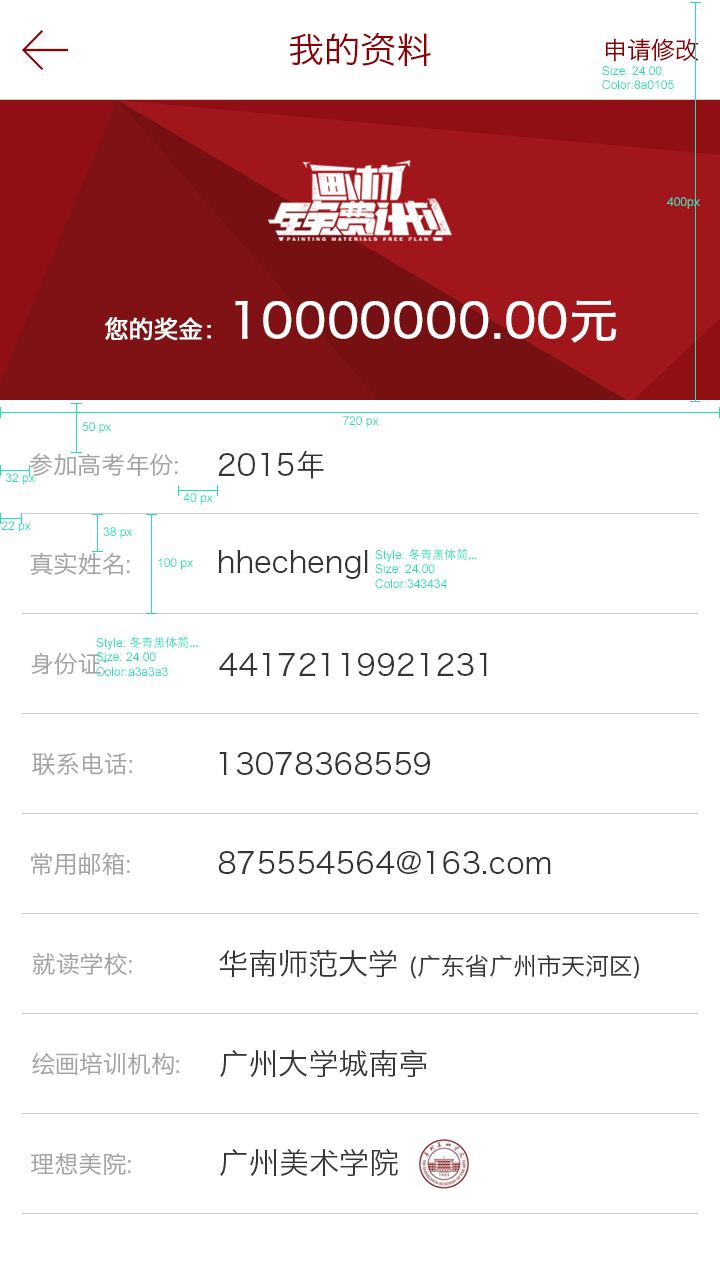
<style>
.page{position:relative;width:720px;height:1280px;background:#ffffff}
.page>*{position:absolute;margin:0}
.t1{font:36px "HiraginoSansGB-W3";color:#8a0105}
.t2{font:24px "HiraginoSansGB-W3";color:#8a0105}
.t3{font:12px "ArialMT";color:#28ddb9}
.t4{font:48px "HiraginoSansGB-W3";color:#ffffff;font-weight:bold}
.t5{font:24.2px "HiraginoSansGB-W3";color:#ffffff;font-weight:bold}
.t6{font:24px "HiraginoSansGB-W3";color:#a3a3a3}
.t7{font:30px "HiraginoSansGB-W3";color:#343434}
.t8{font:12px "AdobeHeitiStd-Regular";color:#28ddb9}
.t9{font:24px "HiraginoSansGB-W3";color:#343434}
</style>
<div class="page">
<p class="t1" style="left:290px;top:32px;width:141px;height:35px">我的资料</p>
<p class="t2" style="left:605px;top:38px;width:94px;height:23px">申请修改</p>
<p class="t3" style="left:602px;top:66px;width:72px;height:24px">Size: 24.00<br>Color:8a0105</p>
<p class="t3" style="left:667px;top:197px;width:33px;height:12px">400px</p>
<p class="t4" style="left:104px;top:300px;width:513px;height:43px"><span class="t5">您的奖金：</span>10000000.00元</p>
<p class="t3" style="left:82px;top:422px;width:30px;height:12px">50 px</p>
<p class="t3" style="left:343px;top:416px;width:36px;height:12px">720 px</p>
<p class="t6" style="left:30px;top:453px;width:148px;height:23px">参加高考年份:</p>
<p class="t7" style="left:218px;top:450px;width:106px;height:29px">2015年</p>
<p class="t3" style="left:5px;top:473px;width:30px;height:12px">32 px</p>
<p class="t3" style="left:183px;top:493px;width:30px;height:12px">40 px</p>
<p class="t3" style="left:1px;top:521px;width:30px;height:12px">22 px</p>
<p class="t3" style="left:103px;top:527px;width:30px;height:12px">38 px</p>
<p class="t6" style="left:30px;top:552px;width:100px;height:24px">真实姓名:</p>
<p class="t3" style="left:158px;top:558px;width:35px;height:12px">100 px</p>
<p class="t7" style="left:218px;top:550px;width:150px;height:29px">hhechengl</p>
<p class="t3" style="left:375px;top:548px;width:102px;height:41px">Style: <span class="t8">冬青黑体简...<br></span>Size: 24.00<br>Color:343434</p>
<p class="t3" style="left:96px;top:636px;width:102px;height:41px">Style: <span class="t8">冬青黑体简...<br></span>Size: 24.00<br>Color:a3a3a3</p>
<p class="t6" style="left:31px;top:652px;width:75px;height:23px">身份证:</p>
<p class="t7" style="left:219px;top:652px;width:268px;height:25px">44172119921231</p>
<p class="t6" style="left:32px;top:752px;width:100px;height:24px">联系电话:</p>
<p class="t7" style="left:219px;top:751px;width:211px;height:24px">13078368559</p>
<p class="t6" style="left:31px;top:852px;width:99px;height:23px">常用邮箱:</p>
<p class="t7" style="left:218px;top:850px;width:333px;height:24px">875554564@163.com</p>
<p class="t6" style="left:32px;top:952px;width:100px;height:24px">就读学校:</p>
<p class="t9" style="left:219px;top:950px;width:420px;height:29px"><span class="t7">华南师范大学 </span>(广东省广州市天河区)</p>
<p class="t7" style="left:220px;top:1049px;width:207px;height:29px">广州大学城南亭</p>
<p class="t6" style="left:32px;top:1052px;width:147px;height:24px">绘画培训机构:</p>
<p class="t6" style="left:31px;top:1153px;width:100px;height:22px">理想美院:</p>
<p class="t7" style="left:220px;top:1148px;width:178px;height:29px">广州美术学院</p>
</div>
